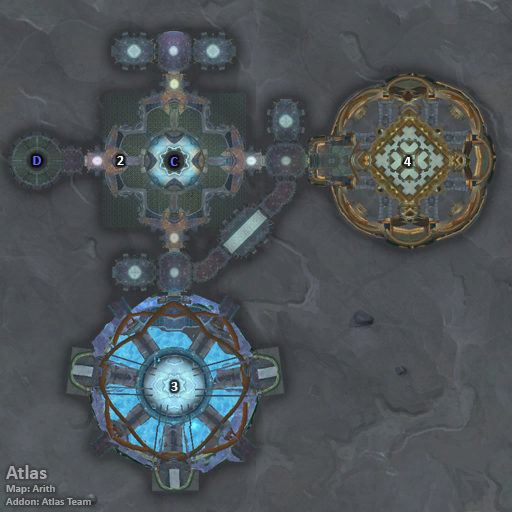
<style>
.page{position:relative;width:512px;height:512px}
.page>*{position:absolute;margin:0}
.t1{font:14px "Calibri-Bold";color:#6666ff}
.t2{font:14px "Calibri-Bold";color:#ffffff}
.t3{font:11px "Calibri-Bold";color:#a5a6a8}
.t4{font:20px "Calibri-Bold";color:#a5a6a8}
</style>
<div class="page">
<p class="t1" style="left:33px;top:156px;width:8px;height:9px">D</p>
<p class="t2" style="left:117px;top:156px;width:7px;height:9px">2</p>
<p class="t1" style="left:170px;top:157px;width:8px;height:9px">C</p>
<p class="t2" style="left:404px;top:157px;width:7px;height:9px">4</p>
<p class="t2" style="left:171px;top:382px;width:7px;height:9px">3</p>
<p class="t3" style="left:6px;top:465px;width:85px;height:40px"><span class="t4">Atlas<br></span>Map: Arith<br>Addon: Atlas Team</p>
</div>
